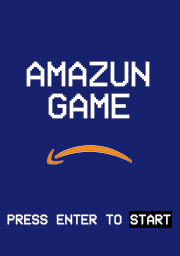
<style>
.page{position:relative;width:180px;height:256px;background:#17216d}
.page>*{position:absolute;margin:0}
.t1{font:36px "VCROSDMono";color:#ffffff}
.t2{font:14px "VCROSDMono";color:#ffffff}
</style>
<div class="page">
<p class="t1" style="left:26px;top:61px;width:124px;height:26px">AMAZUN</p>
<p class="t1" style="left:48px;top:93px;width:82px;height:26px">GAME</p>
<p class="t2" style="left:7px;top:214px;width:164px;height:11px">PRESS ENTER TO START</p>
</div>
